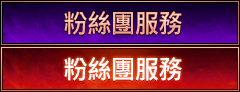
<style>
.page{position:relative;width:240px;height:92px}
.page>*{position:absolute;margin:0}
.t1{font:26px "MicrosoftJhengHeiBold";letter-spacing:-0.05em;scale:0.96 1}
.t2{font:26px "MicrosoftJhengHeiBold";letter-spacing:-0.05em;color:#ffffff;scale:0.96 1}
</style>
<div class="page">
<p class="t1" style="left:64px;top:11px;width:118px;height:24px">粉絲團服務</p>
<p class="t2" style="left:64px;top:57px;width:118px;height:24px">粉絲團服務</p>
</div>
